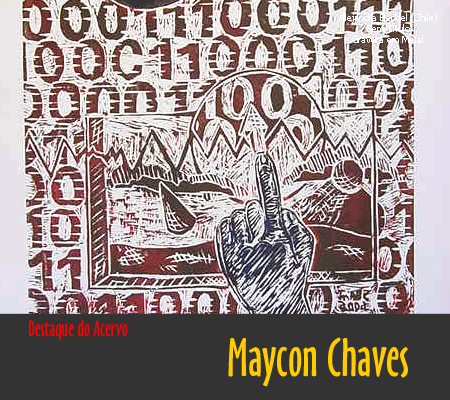
<style>
.page{position:relative;width:450px;height:400px}
.page>*{position:absolute;margin:0}
.t1{font:9px "Tahoma";color:#ffffff}
.t2{font:20.8px "OzHandicraftBT-Roman";color:#ff0000}
.t3{font:50px "OzHandicraftBT-Roman";color:#ffcc00}
</style>
<div class="page">
<p class="t1" style="left:339px;top:13px;width:98px;height:30px;text-align:center">Alejandra Bendel (Chile)<br>Sem Título<br>Gravura em Metal</p>
<p class="t2" style="left:29px;top:320px;width:99px;height:21px">Destaque do Acervo</p>
<p class="t3" style="left:228px;top:337px;width:180px;height:50px">Maycon Chaves</p>
</div>
